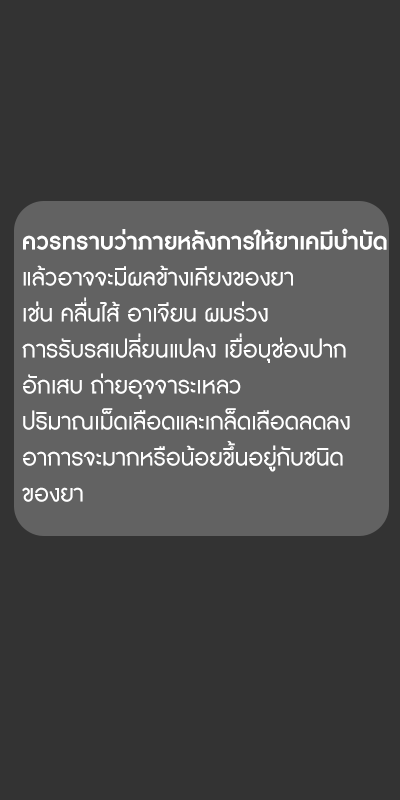
<style>
.page{position:relative;width:400px;height:800px;background:#333333}
.page>*{position:absolute;margin:0}
.t1{font:30px "DBAdmanX";color:#ffffff}
.t2{font:30px "DBAdmanX-Bold";color:#ffffff}
</style>
<div class="page">
<p class="t1" style="left:22px;top:228px;width:365px;height:274px"><span class="t2">ควรทราบว่าภายหลังการให้ยาเคมีบำบัด<br></span>แล้วอาจจะมีผลข้างเคียงของยา <br>เช่น คลื่นไส้ อาเจียน ผมร่วง <br>การรับรสเปลี่ยนแปลง เยื่อบุช่องปาก<br>อักเสบ ถ่ายอุจจาระเหลว <br>ปริมาณเม็ดเลือดและเกล็ดเลือดลดลง <br>อาการจะมากหรือน้อยขึ้นอยู่กับชนิด<br>ของยา</p>
</div>
